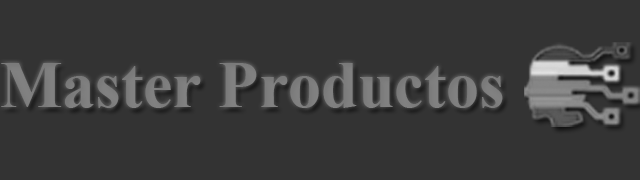
<style>
.page{position:relative;width:640px;height:180px;background:#333333}
.page>*{position:absolute;margin:0}
.t1{font:66px "TimesNewRomanPS-BoldMT";color:#7e7e7e}
</style>
<div class="page">
<p class="t1" style="left:1px;top:63px;width:502px;height:45px">Master Productos</p>
</div>
